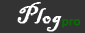
<style>
.page{position:relative;width:85px;height:33px;background:#333333}
.page>*{position:absolute;margin:0}
.t1{font:25.9px "BlackadderITC-Regular";color:#ffffff;font-weight:bold}
.t2{font:10.9px "MicrosoftYaHei";color:#066e03;font-weight:bold}
</style>
<div class="page">
<p class="t1" style="left:17px;top:2px;width:45px;height:30px">Plog</p>
<p class="t2" style="left:62px;top:19px;width:19px;height:9px">pro</p>
</div>
